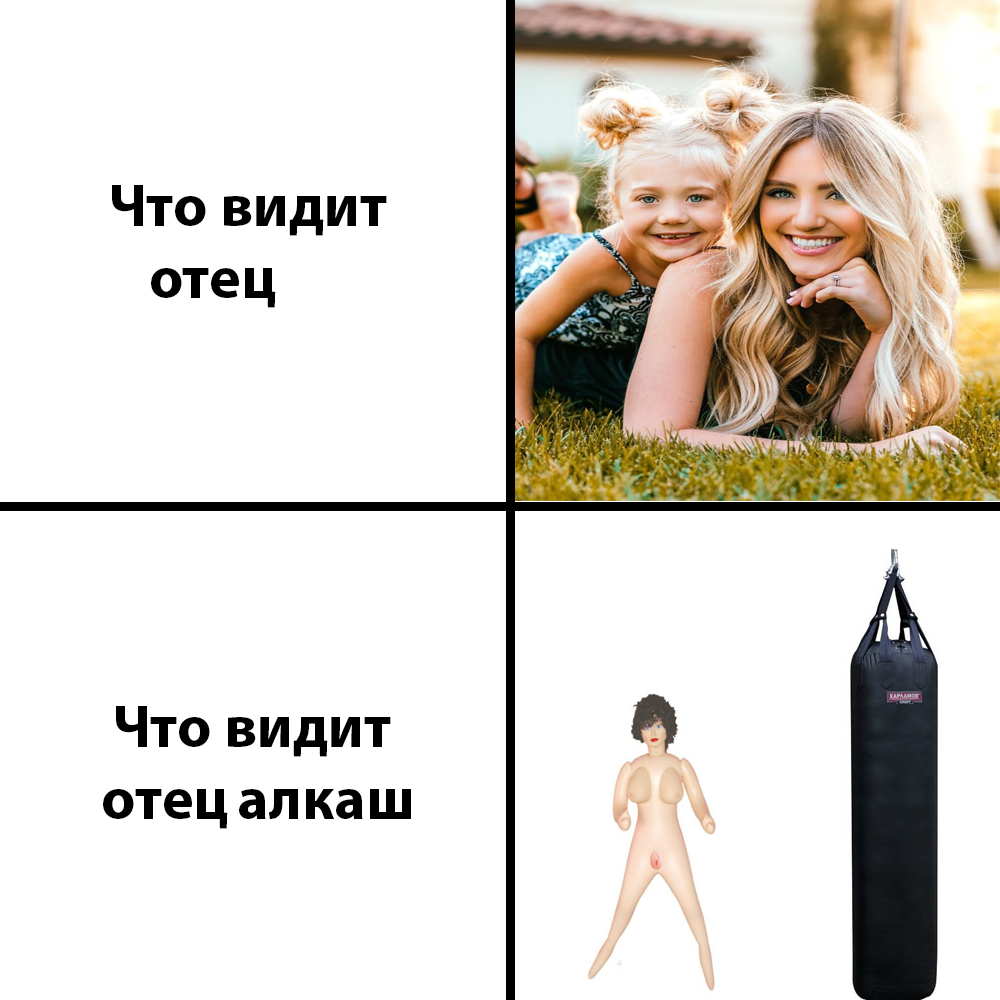
<style>
.page{position:relative;width:1000px;height:1000px;background:#ffffff}
.page>*{position:absolute;margin:0}
.t1{font:60px "MyriadPro-Bold";color:#000000}
.t2{font:30px "MyriadPro-Bold";color:#ffffff}
</style>
<div class="page">
<p class="t1" style="left:112px;top:185px;width:275px;height:123px;text-align:center">Что видит <br>отец<span class="t2">Ipsum</span></p>
<p class="t1" style="left:103px;top:706px;width:308px;height:123px;text-align:center">Что видит <br>отец<span class="t2">I</span>алкаш</p>
</div>
